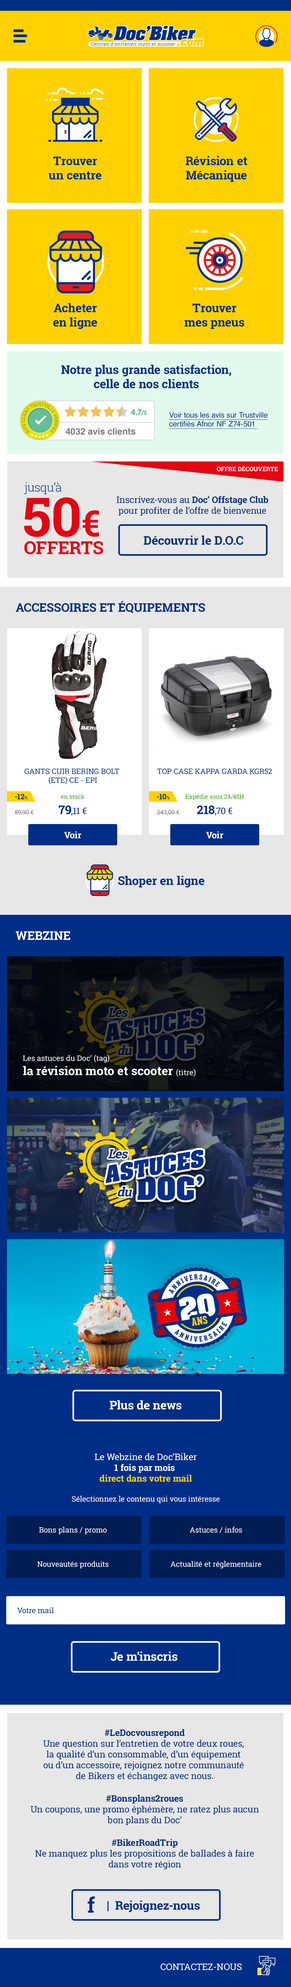
<style>
.page{position:relative;width:291px;height:1987px}
.page>*{position:absolute;margin:0}
.t1{font:12px "RobotoSlab-Bold";color:#002e86}
.t2{font:7.5px "Helvetica";color:#002e86;text-decoration:underline}
.t3{font:9px "Helvetica-Bold";color:#7a7a7a}
.t4{font:6px "RobotoSlab-Bold";color:#ffffff;text-transform:uppercase}
.t5{font:12px "RobotoSlab-Light";color:#002e86}
.t6{font:54px "RobotoSlab-Bold";color:#e30613}
.t7{font:36px "RobotoSlab-Bold";color:#e30613}
.t8{font:9px "RobotoSlab-Regular";color:#002e86}
.t9{font:9px "RobotoSlab-Bold";color:#002e86}
.t10{font:18px "RobotoSlab-Bold";color:#e30613;text-transform:uppercase}
.t11{font:12px "RobotoSlab-Bold";color:#002e86;text-transform:uppercase}
.t12{font:7.5px "RobotoSlab-Regular";color:#002e86}
.t13{font:7.5px "RobotoSlab-Bold";color:#002e86}
.t14{font:4.5px "RobotoSlab-Bold";color:#002e86}
.t15{font:6px "RobotoSlab-Regular";color:#28ac00}
.t16{font:6px "RobotoSlab-Regular";color:#767676}
.t17{font:9px "RobotoSlab-Bold";color:#fefefe}
.t18{font:12px "RobotoSlab-Bold";color:#ffffff;text-transform:uppercase}
.t19{font:12px "RobotoSlab-Bold";color:#ffffff}
.t20{font:7.5px "RobotoSlab-Regular";color:#ffffff}
.t21{font:12px "RobotoSlab-Regular";color:#ffffff}
.t22{font:9px "RobotoSlab-Regular";color:#ffffff}
.t23{font:9px "RobotoSlab-Bold";color:#ffffff}
.t24{font:9px "RobotoSlab-Bold";color:#fad000}
.t25{font:21px "RobotoSlab-Bold";color:#002e86}
.t26{font:9px "RobotoSlab-Regular";color:#ffffff;text-transform:uppercase}
</style>
<div class="page">
<p class="t1" style="left:48px;top:156px;width:53px;height:24px;text-align:center">Trouver<br>un centre</p>
<p class="t1" style="left:186px;top:156px;width:61px;height:26px;text-align:center">Révision et<br>Mécanique</p>
<p class="t1" style="left:53px;top:303px;width:44px;height:26px;text-align:center">Acheter<br>en ligne</p>
<p class="t1" style="left:184px;top:304px;width:60px;height:25px;text-align:center">Trouver<br>mes pneus</p>
<p class="t1" style="left:61px;top:364px;width:170px;height:24px;text-align:center">Notre plus grande satisfaction,<br>celle de nos clients</p>
<p class="t2" style="left:169px;top:412px;width:99px;height:17px">Voir tous les avis sur Trustville<br>certifiés Afnor NF Z74-501</p>
<p class="t3" style="left:66px;top:428px;width:69px;height:7px">4032 avis clients</p>
<p class="t4" style="left:217px;top:466px;width:61px;height:5px">Offre découverte</p>
<p class="t5" style="left:24px;top:482px;width:37px;height:12px">jusqu’à</p>
<p class="t6" style="left:24px;top:497px;width:75px;height:40px">50<span class="t7">€</span></p>
<p class="t8" style="left:117px;top:496px;width:151px;height:19px;text-align:center">Inscrivez-vous au <span class="t9">Doc’ Offstage Club<br></span>pour profiter de l’offre de bienvenue</p>
<p class="t10" style="left:24px;top:541px;width:79px;height:13px">offerts</p>
<p class="t1" style="left:144px;top:535px;width:99px;height:10px">Découvrir le D.O.C</p>
<p class="t11" style="left:16px;top:601px;width:189px;height:12px">Accessoires et équipements</p>
<p class="t12" style="left:25px;top:768px;width:94px;height:16px;text-align:center">GANTS CUIR BERING BOLT <br>(ETE) CE - EPI</p>
<p class="t12" style="left:157px;top:768px;width:115px;height:6px">TOP CASE KAPPA GARDA KGR52</p>
<p class="t13" style="left:15px;top:794px;width:13px;height:5px">-12<span class="t14">%</span></p>
<p class="t15" style="left:61px;top:794px;width:23px;height:5px">en stock</p>
<p class="t13" style="left:157px;top:794px;width:13px;height:5px">-10<span class="t14">%</span></p>
<p class="t15" style="left:185px;top:794px;width:59px;height:6px">Expédié sous 24/48H</p>
<p class="t16" style="left:15px;top:810px;width:19px;height:5px">89,90 €</p>
<p class="t8" style="left:59px;top:805px;width:27px;height:11px"><span class="t1">79</span>,11 €</p>
<p class="t16" style="left:157px;top:810px;width:22px;height:5px">243,00 €</p>
<p class="t8" style="left:197px;top:805px;width:35px;height:11px"><span class="t1">218</span>,70 €</p>
<p class="t17" style="left:64px;top:831px;width:17px;height:7px">Voir</p>
<p class="t17" style="left:206px;top:831px;width:17px;height:7px">Voir</p>
<p class="t1" style="left:118px;top:876px;width:86px;height:11px">Shoper en ligne</p>
<p class="t18" style="left:16px;top:931px;width:54px;height:9px">webzine</p>
<p class="t19" style="left:23px;top:1054px;width:173px;height:22px"><span class="t20">Les astuces du Doc’ (tag)</span><span class="t21"> <br></span>la révision moto et scooter <span class="t20">(titre)</span></p>
<p class="t19" style="left:110px;top:1400px;width:72px;height:9px">Plus de news</p>
<p class="t20" style="left:72px;top:1453px;width:148px;height:50px;text-align:center"><span class="t22">Le Webzine de Doc’Biker<br></span><span class="t23">1 fois par mois <br></span><span class="t24">direct dans votre mail<br><br></span>Sélectionnez le contenu qui vous intéresse</p>
<p class="t20" style="left:39px;top:1526px;width:68px;height:8px">Bons plans / promo</p>
<p class="t20" style="left:190px;top:1526px;width:52px;height:7px">Astuces / infos</p>
<p class="t20" style="left:37px;top:1560px;width:72px;height:8px">Nouveautés produits</p>
<p class="t20" style="left:170px;top:1560px;width:91px;height:8px">Actualité et réglementaire</p>
<p class="t12" style="left:17px;top:1607px;width:37px;height:6px">Votre mail</p>
<p class="t19" style="left:110px;top:1651px;width:67px;height:10px">Je m’inscris</p>
<p class="t8" style="left:43px;top:1729px;width:201px;height:52px;text-align:center"><span class="t9">#LeDocvousrepond</span><br>Une question sur l’entretien de votre deux roues, <br>la qualité d’un consommable, d’un équipement <br>ou d’un accessoire, rejoignez notre communauté <br>de Bikers et échangez avec nous.</p>
<p class="t8" style="left:31px;top:1794px;width:228px;height:31px;text-align:center"><span class="t9">#Bonsplans2roues<br></span>Un coupons, une promo éphémère, ne ratez plus aucun<br>bon plans du Doc’</p>
<p class="t8" style="left:35px;top:1838px;width:219px;height:31px;text-align:center"><span class="t9">#BikerRoadTrip<br></span>Ne manquez plus les propositions de ballades à faire<br>dans votre région</p>
<p class="t1" style="left:88px;top:1896px;width:112px;height:16px"><span class="t25">f</span>    |  Rejoignez-nous</p>
<p class="t26" style="left:161px;top:1963px;width:81px;height:7px">contactez-nous</p>
</div>
